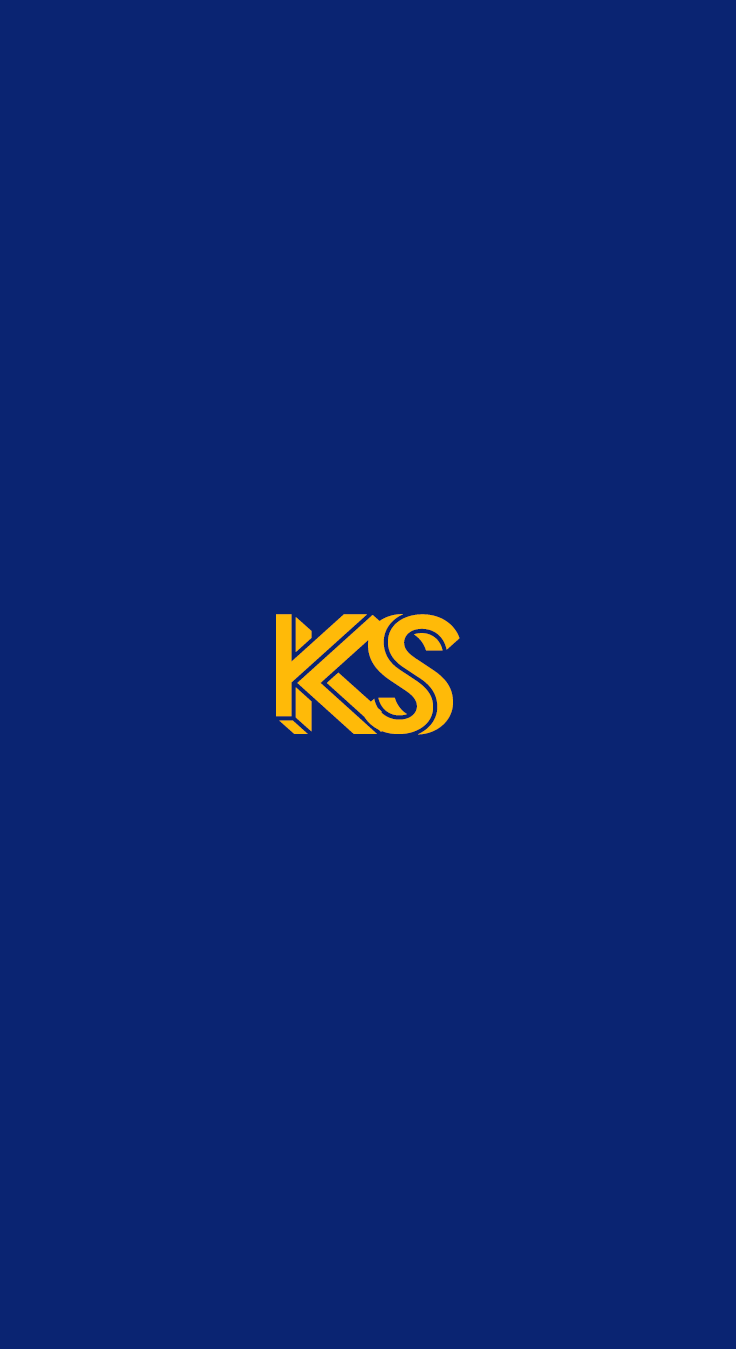
<style>
.page{position:relative;width:736px;height:1349px;background:#0a2472}
.page>*{position:absolute;margin:0}
.t1{font:165.7px "Macula-Solid";letter-spacing:-0.2em;color:#ffba08;text-transform:uppercase}
</style>
<div class="page">
<p class="t1" style="left:276px;top:614px;width:184px;height:121px">KS</p>
</div>
